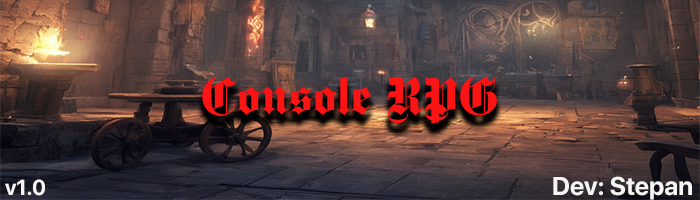
<style>
.page{position:relative;width:700px;height:200px}
.page>*{position:absolute;margin:0}
.t1{font:21.5px "SFProDisplay-Bold";color:#f5f5f4}
.t2{font:25.6px "SFProDisplay-Bold";color:#f5f5f4}
</style>
<div class="page">
<p class="t1" style="left:5px;top:179px;width:40px;height:17px">v1.0</p>
<p class="t2" style="left:553px;top:176px;width:139px;height:24px">Dev: Stepan</p>
</div>
